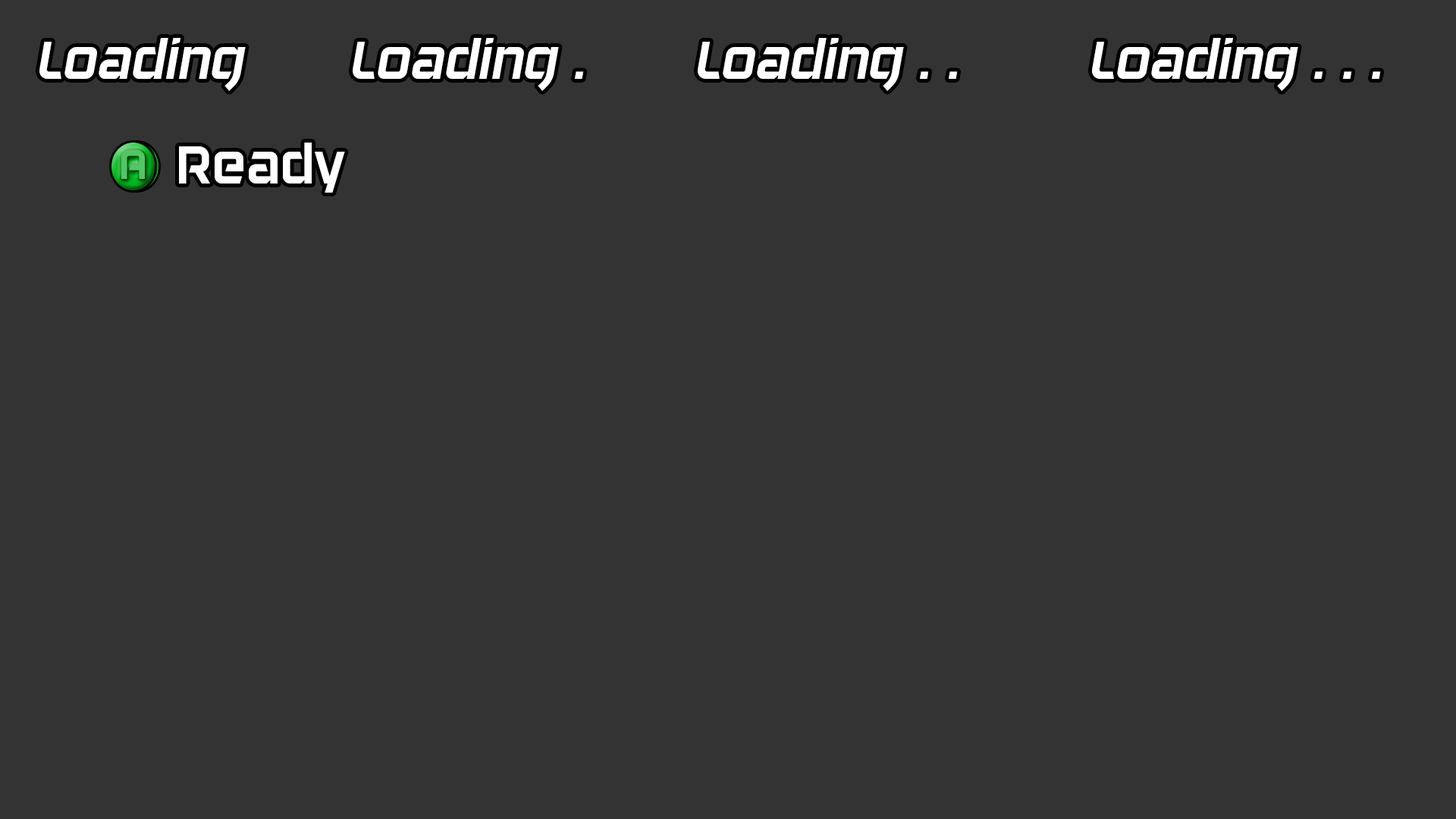
<style>
.page{position:relative;width:1456px;height:819px;background:#333333}
.page>*{position:absolute;margin:0}
.t1{font:54.6px "DAGGERSQUARE-OBLIQUE";color:#ffffff}
.t2{font:54.6px "DAGGERSQUARE";color:#ffffff}
.t3{font:42.5px "DAGGERSQUARE";color:#52c764}
</style>
<div class="page">
<p class="t1" style="left:39px;top:38px;width:207px;height:53px">Loading</p>
<p class="t1" style="left:353px;top:38px;width:231px;height:53px">Loading .</p>
<p class="t1" style="left:698px;top:38px;width:260px;height:53px">Loading . .</p>
<p class="t1" style="left:1092px;top:38px;width:289px;height:53px">Loading . . .</p>
<p class="t2" style="left:179px;top:143px;width:166px;height:50px">Ready</p>
<p class="t3" style="left:121px;top:150px;width:24px;height:29px">A</p>
</div>
